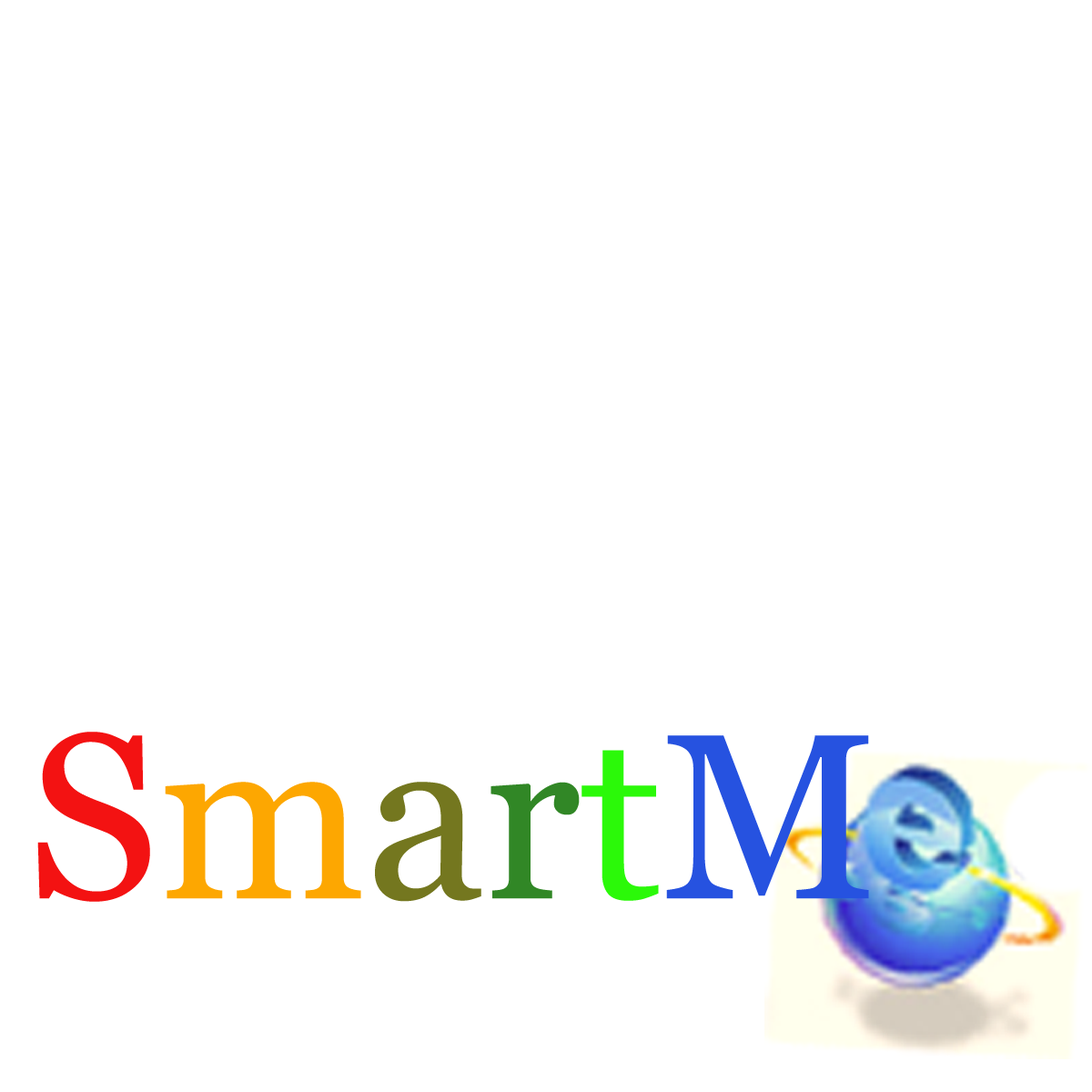
<style>
.page{position:relative;width:1092px;height:1092px;background:#ffffff}
.page>*{position:absolute;margin:0}
.t1{font:234.8px "Georgia";color:#f31212}
.t2{font:234.8px "Georgia";color:#fda701}
.t3{font:234.8px "Georgia";color:#74771f}
.t4{font:234.8px "Georgia";color:#318726}
.t5{font:234.8px "Georgia";color:#2bf909}
.t6{font:234.8px "Georgia";color:#2652e0}
</style>
<div class="page">
<p class="t1" style="left:37px;top:732px;width:832px;height:170px">S<span class="t2">m</span><span class="t3">a</span><span class="t4">r</span><span class="t5">t</span><span class="t6">M</span></p>
</div>
